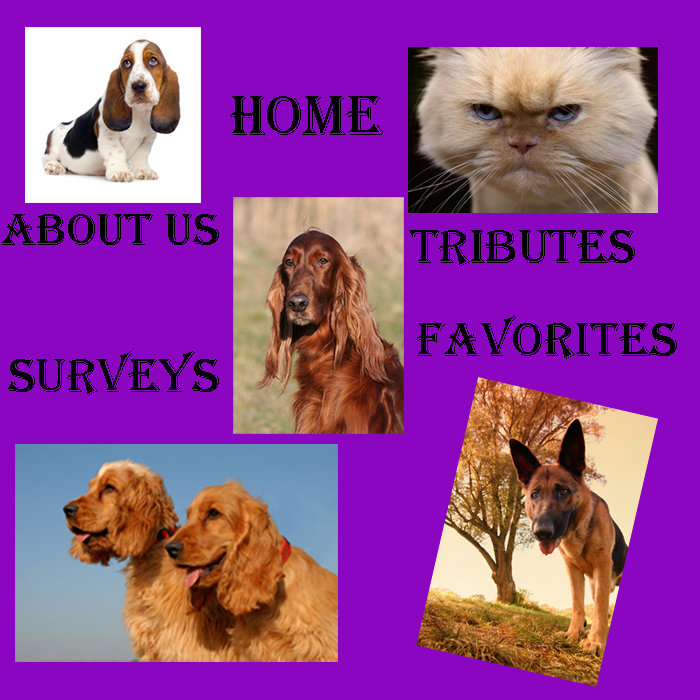
<style>
.page{position:relative;width:700px;height:700px;background:#8a06c1}
.page>*{position:absolute;margin:0}
.t1{font:59px "Algerian";color:#000000}
.t2{font:47.2px "Algerian";color:#000000}
.t3{font:50px "Algerian";color:#000000}
</style>
<div class="page">
<p class="t1" style="left:230px;top:96px;width:153px;height:39px">Home</p>
<p class="t2" style="left:2px;top:214px;width:217px;height:31px">About US</p>
<p class="t3" style="left:409px;top:230px;width:226px;height:36px">Tributes</p>
<p class="t3" style="left:416px;top:315px;width:261px;height:44px">favorites</p>
<p class="t3" style="left:8px;top:351px;width:211px;height:44px">Surveys</p>
</div>
